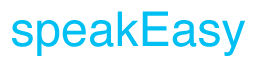
<style>
.page{position:relative;width:256px;height:64px;background:#ffffff}
.page>*{position:absolute;margin:0}
.t1{font:48px "Helvetica";color:#00bff3}
</style>
<div class="page">
<p class="t1" style="left:12px;top:11px;width:233px;height:45px">speakEasy</p>
</div>
